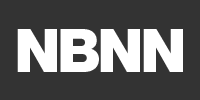
<style>
.page{position:relative;width:200px;height:100px;background:#333333}
.page>*{position:absolute;margin:0}
.t1{font:60.5px "NHaasGroteskDSPro-95Blk";letter-spacing:-0.025em;color:#ffffff}
</style>
<div class="page">
<p class="t1" style="left:17px;top:29px;width:166px;height:43px">NBNN</p>
</div>
